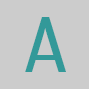
<style>
.page{position:relative;width:89px;height:89px;background:#cccccc}
.page>*{position:absolute;margin:0}
.t1{font:72px "Ayuthaya";color:#339999}
</style>
<div class="page">
<p class="t1" style="left:25px;top:17px;width:41px;height:55px">A</p>
</div>
